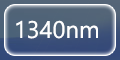
<style>
.page{position:relative;width:120px;height:60px}
.page>*{position:absolute;margin:0}
.t1{font:24px "SegoeUI";color:#ffffff}
</style>
<div class="page">
<p class="t1" style="left:16px;top:20px;width:82px;height:19px">1340nm</p>
</div>
